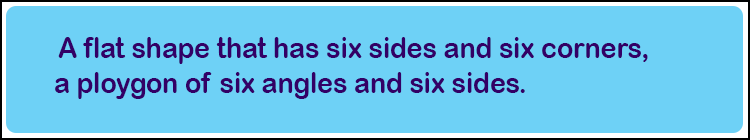
<style>
.page{position:relative;width:750px;height:140px;background:#6ed1f6}
.page>*{position:absolute;margin:0}
.t1{font:29.2px "ArialRoundedMTBold";color:#330066;scale:0.91 1}
</style>
<div class="page">
<p class="t1" style="left:55px;top:37px;width:593px;height:62px">A flat shape that has six sides and six corners,<br>a ploygon of six angles and six sides.</p>
</div>
